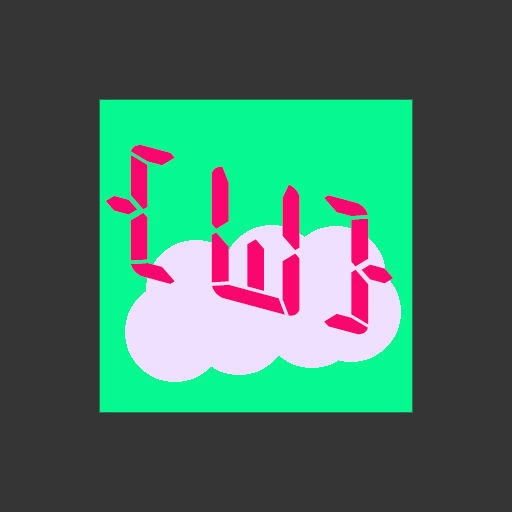
<style>
.page{position:relative;width:512px;height:512px;background:#353535}
.page>*{position:absolute;margin:0}
.t1{font:200px "Digital-7Mono";color:#f9066e;scale:1.18 1}
</style>
<div class="page">
<p class="t1" style="left:105px;top:145px;width:288px;height:190px;rotate:15deg">{W}</p>
</div>
